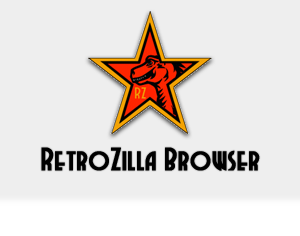
<style>
.page{position:relative;width:300px;height:236px;background:#eeeeee}
.page>*{position:absolute;margin:0}
.t1{font:30px "DubbaDubbaNF";color:#000000;font-weight:bold}
</style>
<div class="page">
<p class="t1" style="left:41px;top:147px;width:219px;height:24px">RetroZilla Browser</p>
</div>
